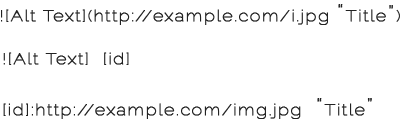
<style>
.page{position:relative;width:400px;height:135px;background:#ffffff}
.page>*{position:absolute;margin:0}
.t1{font:15.3px "Raleway-Thin";letter-spacing:0.05em;color:#222222;font-weight:bold;scale:1.2 1}
.t2{font:23px "Raleway-Thin";letter-spacing:0.05em;color:#222222;font-weight:bold;scale:1.2 1}
.t3{font:21.7px "Raleway-Thin";letter-spacing:0.05em;color:#222222;font-weight:bold;scale:1.2 1}
</style>
<div class="page">
<p class="t1" style="left:1px;top:4px;width:400px;height:21px">![Alt Text](http://example.com/i.jpg <span class="t2">“</span>Title<span class="t3">”</span>)</p>
<p class="t1" style="left:3px;top:52px;width:369px;height:67px">![Alt Text]  [id]<br><br>[id]:http://example.com/img.jpg  <span class="t2">“</span>Title<span class="t2">”</span></p>
</div>
